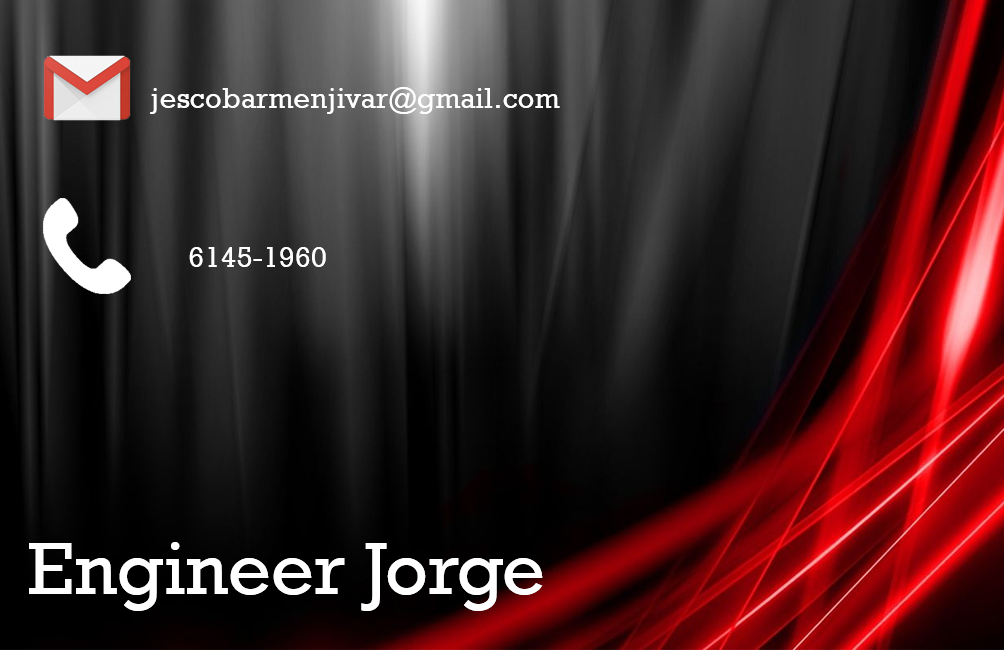
<style>
.page{position:relative;width:1004px;height:650px}
.page>*{position:absolute;margin:0}
.t1{font:29.2px "Rockwell";color:#ffffff}
.t2{font:75px "Rockwell";color:#ffffff}
</style>
<div class="page">
<p class="t1" style="left:150px;top:87px;width:410px;height:27px">jescobarmenjivar@gmail.com</p>
<p class="t1" style="left:189px;top:247px;width:137px;height:20px">6145-1960</p>
<p class="t2" style="left:29px;top:542px;width:514px;height:69px">Engineer Jorge</p>
</div>
